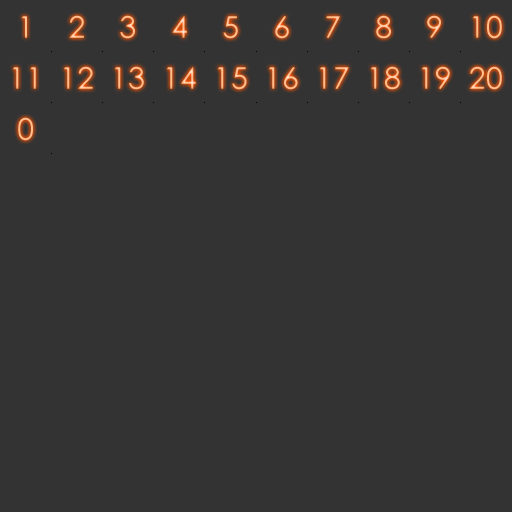
<style>
.page{position:relative;width:512px;height:512px;background:#333333}
.page>*{position:absolute;margin:0}
.t1{font:30px "CenturyGothic";letter-spacing:0.025em;color:#ffbe8e}
.t2{font:30px "CenturyGothic";letter-spacing:0.025em;color:#ffc091}
.t3{font:30px "CenturyGothic";letter-spacing:0.025em;color:#ffc092}
.t4{font:30px "CenturyGothic";letter-spacing:0.025em;color:#ffc79e}
.t5{font:30px "CenturyGothic";letter-spacing:0.025em;color:#ffc193}
.t6{font:30px "CenturyGothic";letter-spacing:0.025em;color:#ffbe8f}
.t7{font:30px "CenturyGothic";letter-spacing:0.025em;color:#ffc194}
.t8{font:30px "CenturyGothic";letter-spacing:0.025em}
.t9{font:30px "CenturyGothic";letter-spacing:0.025em;color:#ffbf90}
</style>
<div class="page">
<p class="t1" style="left:21px;top:16px;width:6px;height:22px">1</p>
<p class="t2" style="left:69px;top:15px;width:15px;height:23px">2</p>
<p class="t3" style="left:120px;top:15px;width:15px;height:24px">3</p>
<p class="t4" style="left:172px;top:15px;width:15px;height:23px">4</p>
<p class="t3" style="left:223px;top:16px;width:15px;height:23px">5</p>
<p class="t5" style="left:275px;top:15px;width:14px;height:24px">6</p>
<p class="t6" style="left:326px;top:16px;width:14px;height:23px">7</p>
<p class="t2" style="left:376px;top:15px;width:15px;height:24px">8</p>
<p class="t7" style="left:427px;top:15px;width:14px;height:24px">9</p>
<p class="t1" style="left:472px;top:15px;width:30px;height:24px">10</p>
<p class="t1" style="left:12px;top:67px;width:24px;height:22px">11</p>
<p class="t1" style="left:63px;top:66px;width:30px;height:23px">12</p>
<p class="t6" style="left:114px;top:66px;width:30px;height:24px">13</p>
<p class="t8" style="left:166px;top:66px;width:30px;height:23px">14</p>
<p class="t6" style="left:217px;top:67px;width:30px;height:23px">15</p>
<p class="t2" style="left:268px;top:66px;width:30px;height:24px">16</p>
<p class="t1" style="left:319px;top:67px;width:30px;height:23px">17</p>
<p class="t2" style="left:370px;top:66px;width:30px;height:24px">18</p>
<p class="t2" style="left:421px;top:66px;width:29px;height:24px">19</p>
<p class="t6" style="left:469px;top:66px;width:33px;height:24px">20</p>
<p class="t9" style="left:18px;top:117px;width:15px;height:24px">0</p>
</div>
